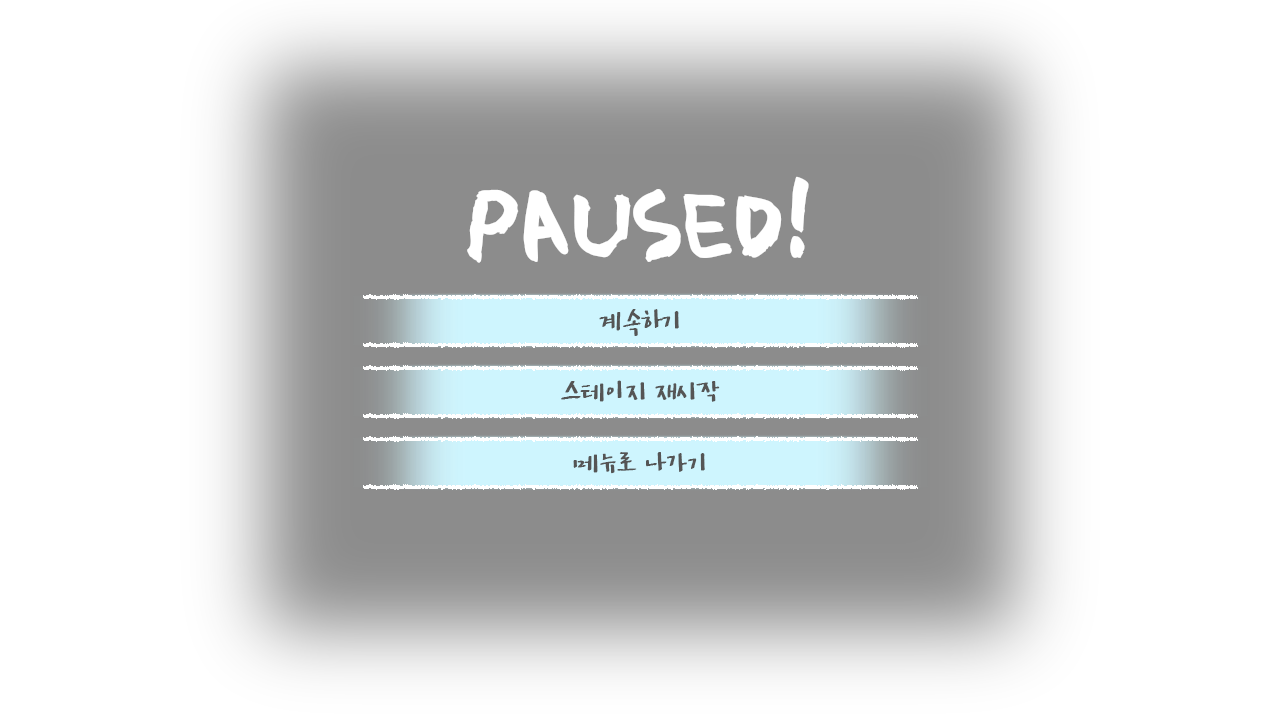
<style>
.page{position:relative;width:1280px;height:720px;background:#ffffff}
.page>*{position:absolute;margin:0}
.t1{font:120px "Yoon-SMJ";letter-spacing:-0.13em;color:#ffffff;font-weight:bold}
.t2{font:36px "YunTaemin";color:#555555}
</style>
<div class="page">
<p class="t1" style="left:467px;top:176px;width:342px;height:87px">PAUSED!</p>
<p class="t2" style="left:599px;top:309px;width:80px;height:27px">계속하기</p>
<p class="t2" style="left:561px;top:380px;width:159px;height:22px">스테이지 재시작</p>
<p class="t2" style="left:573px;top:452px;width:132px;height:22px">메뉴로 나가기</p>
</div>
